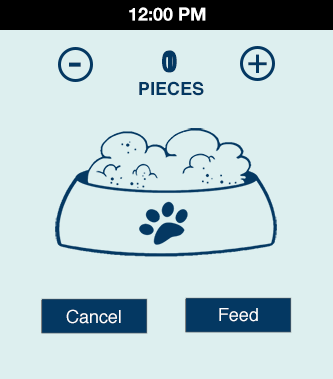
<style>
.page{position:relative;width:333px;height:379px;background:#ddefef}
.page>*{position:absolute;margin:0}
.t1{font:18px "HelveticaNeue-Bold";color:#ffffff}
.t2{font:30px "Helvetica-Bold";color:#043862}
.t3{font:36px "Helvetica";color:#043862}
.t4{font:48px "Helvetica";color:#043862}
.t5{font:18px "Helvetica-Bold";color:#043862}
.t6{font:18px "Helvetica";color:#ffffff}
</style>
<div class="page">
<p class="t1" style="left:129px;top:7px;width:77px;height:14px">12:00 PM</p>
<p class="t2" style="left:162px;top:50px;width:15px;height:23px">0</p>
<p class="t2" style="left:163px;top:50px;width:10px;height:22px">1</p>
<p class="t3" style="left:248px;top:54px;width:19px;height:19px">+</p>
<p class="t4" style="left:69px;top:62px;width:12px;height:5px">-</p>
<p class="t5" style="left:139px;top:81px;width:65px;height:15px">PIECES</p>
<p class="t6" style="left:66px;top:309px;width:55px;height:15px">Cancel</p>
<p class="t6" style="left:219px;top:308px;width:39px;height:14px">Feed</p>
</div>
